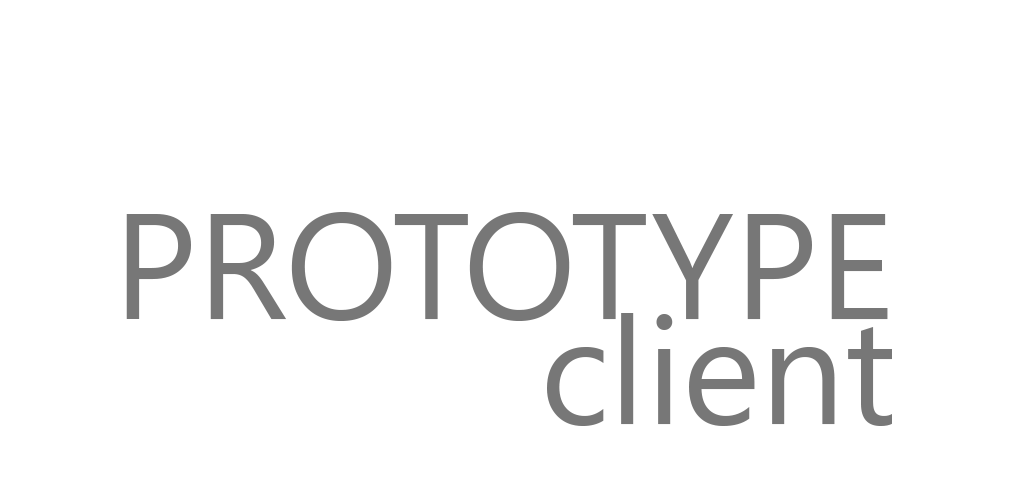
<style>
.page{position:relative;width:1024px;height:500px;background:#ffffff}
.page>*{position:absolute;margin:0}
.t1{font:150px "SegoeUI";color:#777777}
</style>
<div class="page">
<p class="t1" style="left:126px;top:212px;width:762px;height:109px">PROTOTYPE</p>
<p class="t1" style="left:547px;top:313px;width:345px;height:113px">client</p>
</div>
